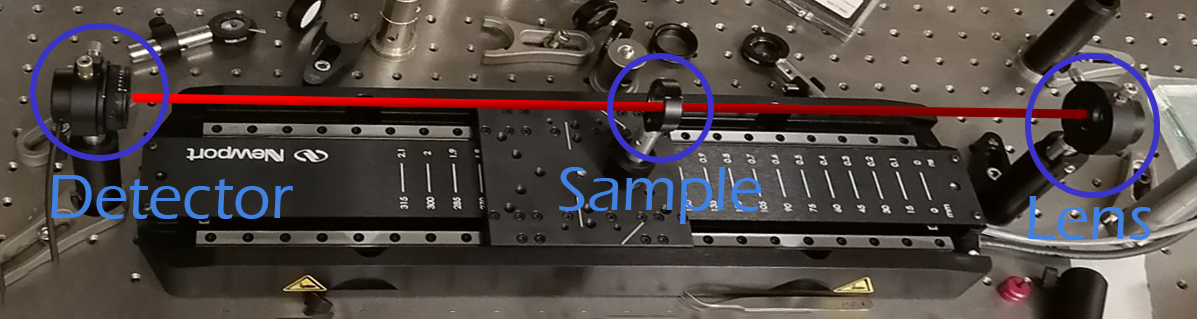
<style>
.page{position:relative;width:1197px;height:319px}
.page>*{position:absolute;margin:0}
.t1{font:64px "ErasITC-Medium";color:#4081e2}
</style>
<div class="page">
<p class="t1" style="left:559px;top:167px;width:203px;height:57px">Sample</p>
<p class="t1" style="left:51px;top:175px;width:242px;height:44px">Detector</p>
<p class="t1" style="left:1028px;top:196px;width:123px;height:44px">Lens</p>
</div>
